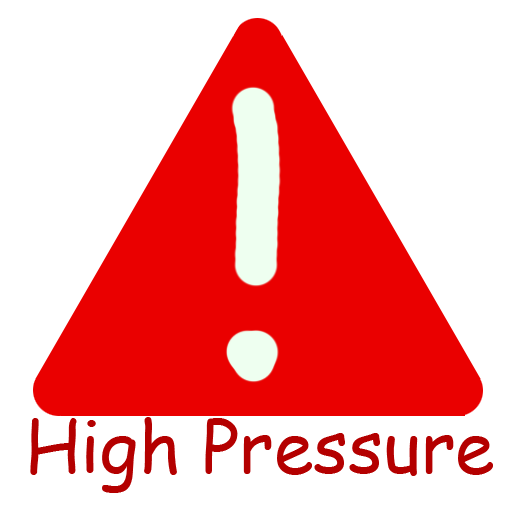
<style>
.page{position:relative;width:512px;height:512px;background:#ffffff}
.page>*{position:absolute;margin:0}
.t1{font:72px "ComicSansMS";color:#b40000}
</style>
<div class="page">
<p class="t1" style="left:30px;top:417px;width:463px;height:76px">High Pressure</p>
</div>
